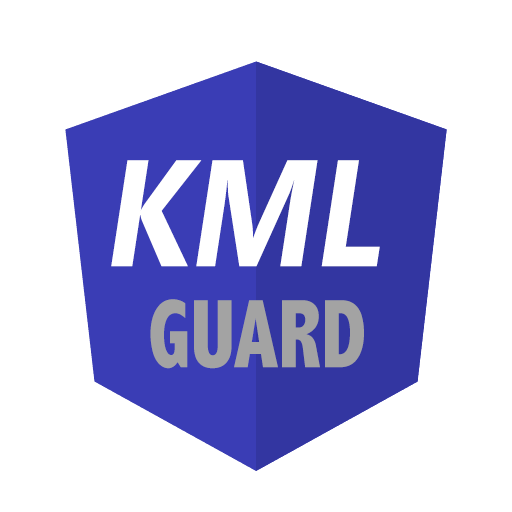
<style>
.page{position:relative;width:512px;height:512px;background:#ffffff}
.page>*{position:absolute;margin:0}
.t1{font:151.1px "MicrosoftTaiLe-Bold";color:#ffffff;font-style:italic;scale:0.87 1}
.t2{font:98.3px "AbadiMT-CondensedExtraBold";color:#a3a3a3;scale:0.87 1}
</style>
<div class="page">
<p class="t1" style="left:111px;top:160px;width:269px;height:107px">KML</p>
<p class="t2" style="left:150px;top:299px;width:214px;height:70px">GUARD</p>
</div>
